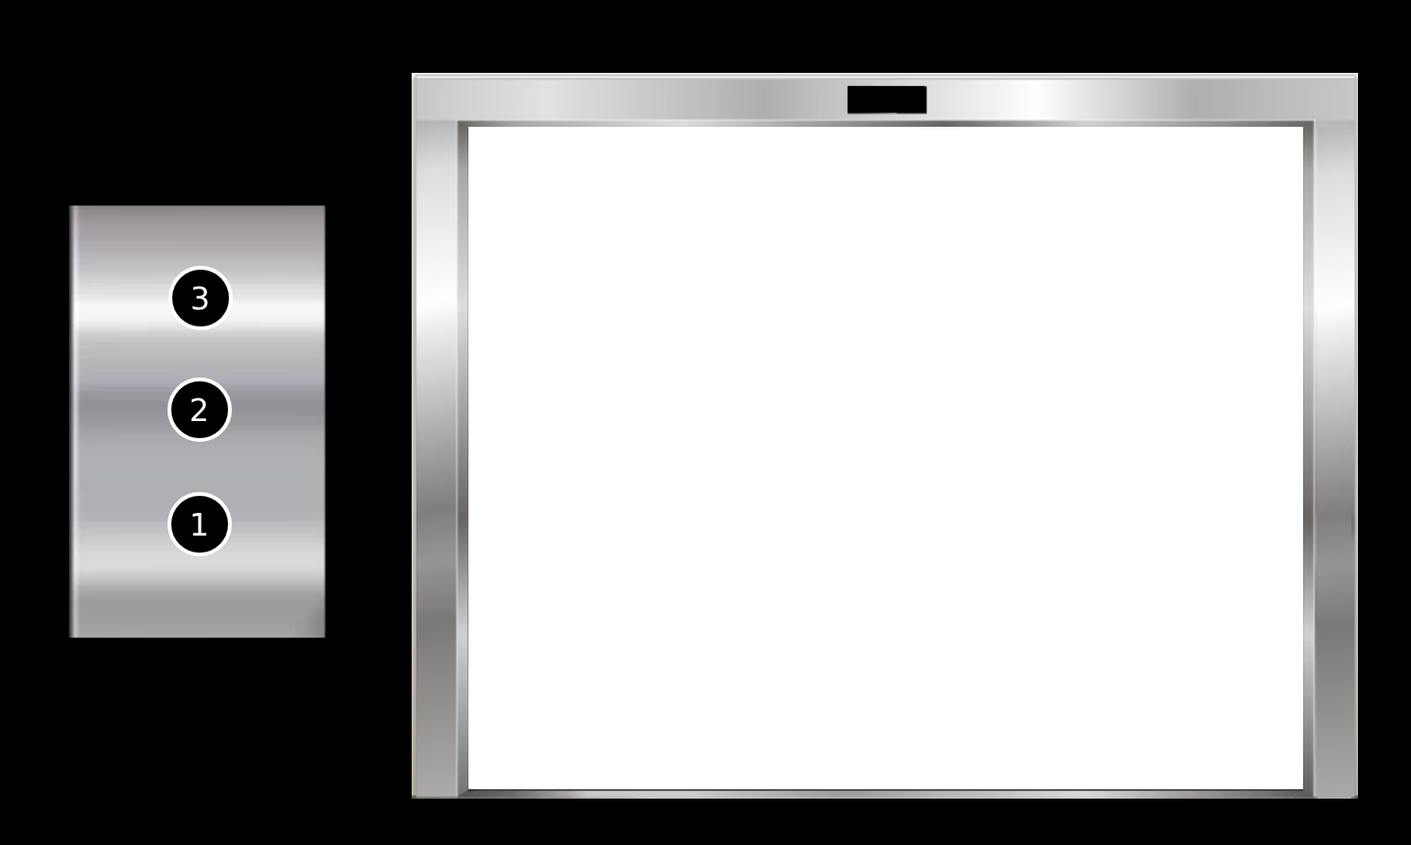
<style>
.page{position:relative;width:1411px;height:845px;background:#ffffff}
.page>*{position:absolute;margin:0}
.t1{font:31.2px "DejaVuSans";color:#ffffff}
</style>
<div class="page">
<p class="t1" style="left:192px;top:286px;width:16px;height:24px">3</p>
<p class="t1" style="left:191px;top:397px;width:15px;height:25px">2</p>
<p class="t1" style="left:192px;top:513px;width:14px;height:23px">1</p>
</div>
